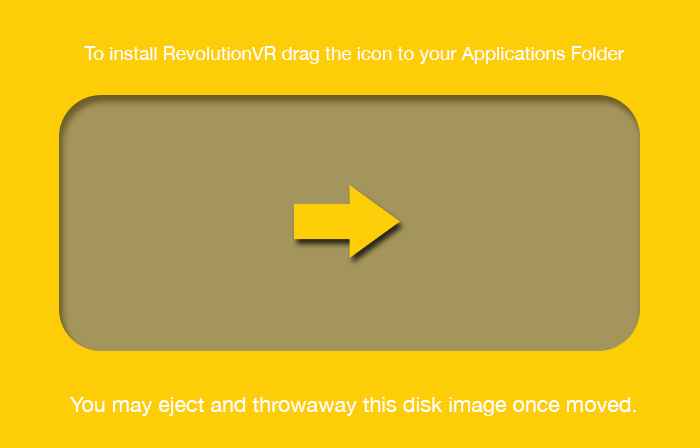
<style>
.page{position:relative;width:700px;height:448px;background:#fdcd08}
.page>*{position:absolute;margin:0}
.t1{font:18.8px "HelveticaNeue";color:#ffffff}
.t2{font:21.5px "HelveticaNeue";color:#ffffff}
</style>
<div class="page">
<p class="t1" style="left:84px;top:46px;width:541px;height:18px">To install RevolutionVR drag the icon to your Applications Folder</p>
<p class="t2" style="left:70px;top:397px;width:566px;height:19px">You may eject and throwaway this disk image once moved.</p>
</div>
